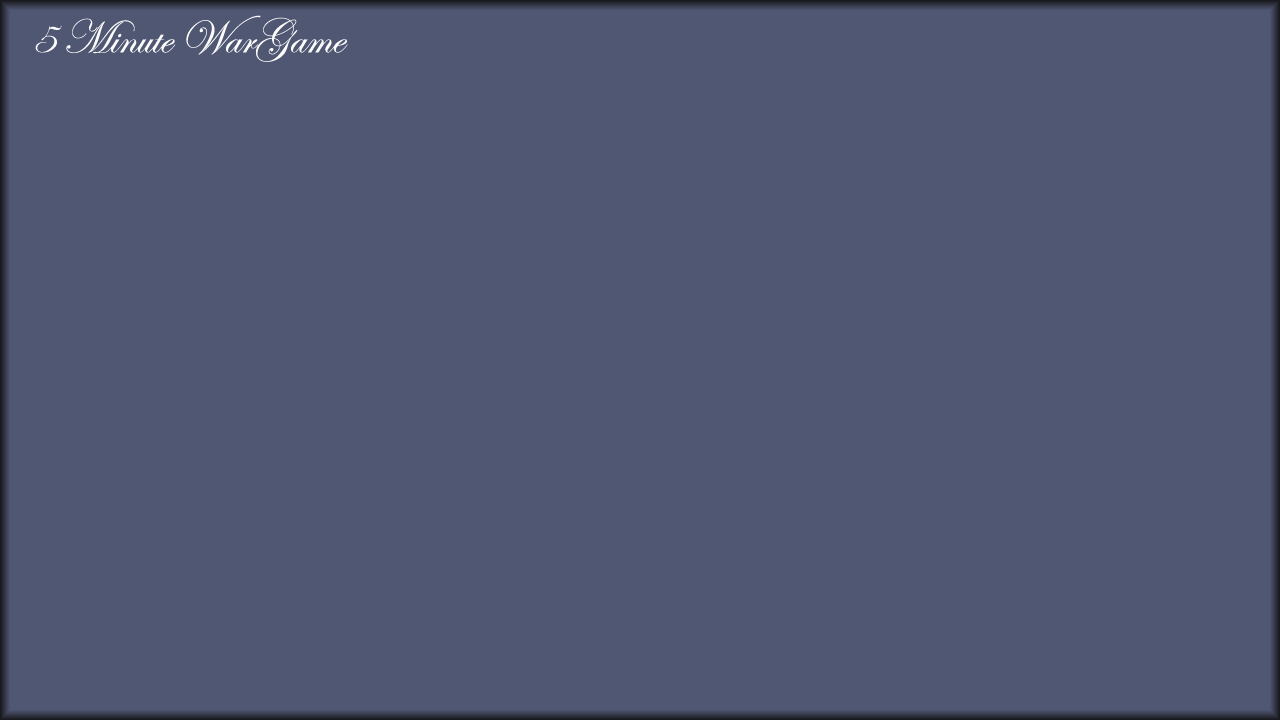
<style>
.page{position:relative;width:1280px;height:720px;background:#4f5773}
.page>*{position:absolute;margin:0}
.t1{font:48px "EdwardianScriptITC";color:#fdfcfc}
</style>
<div class="page">
<p class="t1" style="left:35px;top:15px;width:313px;height:47px">5 Minute WarGame</p>
</div>
